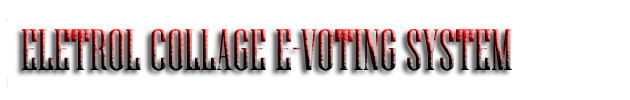
<style>
.page{position:relative;width:630px;height:100px;background:#ffffff}
.page>*{position:absolute;margin:0}
.t1{font:58px "NiagaraSolid-Reg"}
</style>
<div class="page">
<p class="t1" style="left:22px;top:29px;width:490px;height:42px">ELETROL COLLAGE E-VOTING SYSTEM</p>
</div>
